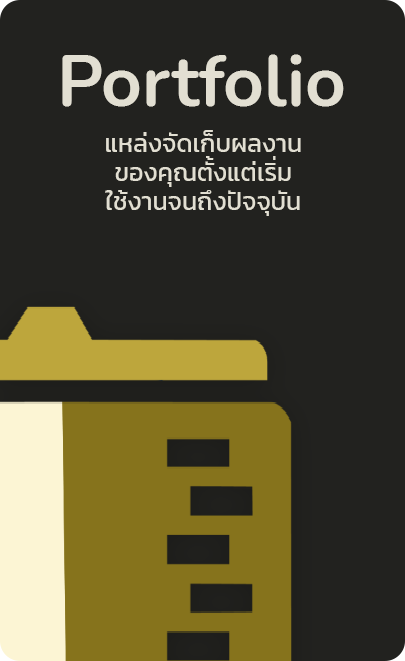
<style>
.page{position:relative;width:405px;height:661px;background:#22221f}
.page>*{position:absolute;margin:0}
.t1{font:70.8px "Nunito-Bold";color:#e2dfd2}
.t2{font:25px/29.2px "Kanit-Regular";color:#e2dfd2}
</style>
<div class="page">
<p class="t1" style="left:62px;top:54px;width:282px;height:53px">Portfolio</p>
<p class="t2" style="left:105px;top:130px;width:196px;height:86px;text-align:center">แหล่งจัดเก็บผลงาน<br>ของคุณตั้งแต่เริ่ม<br>ใช้งานจนถึงปัจจุบัน</p>
</div>
